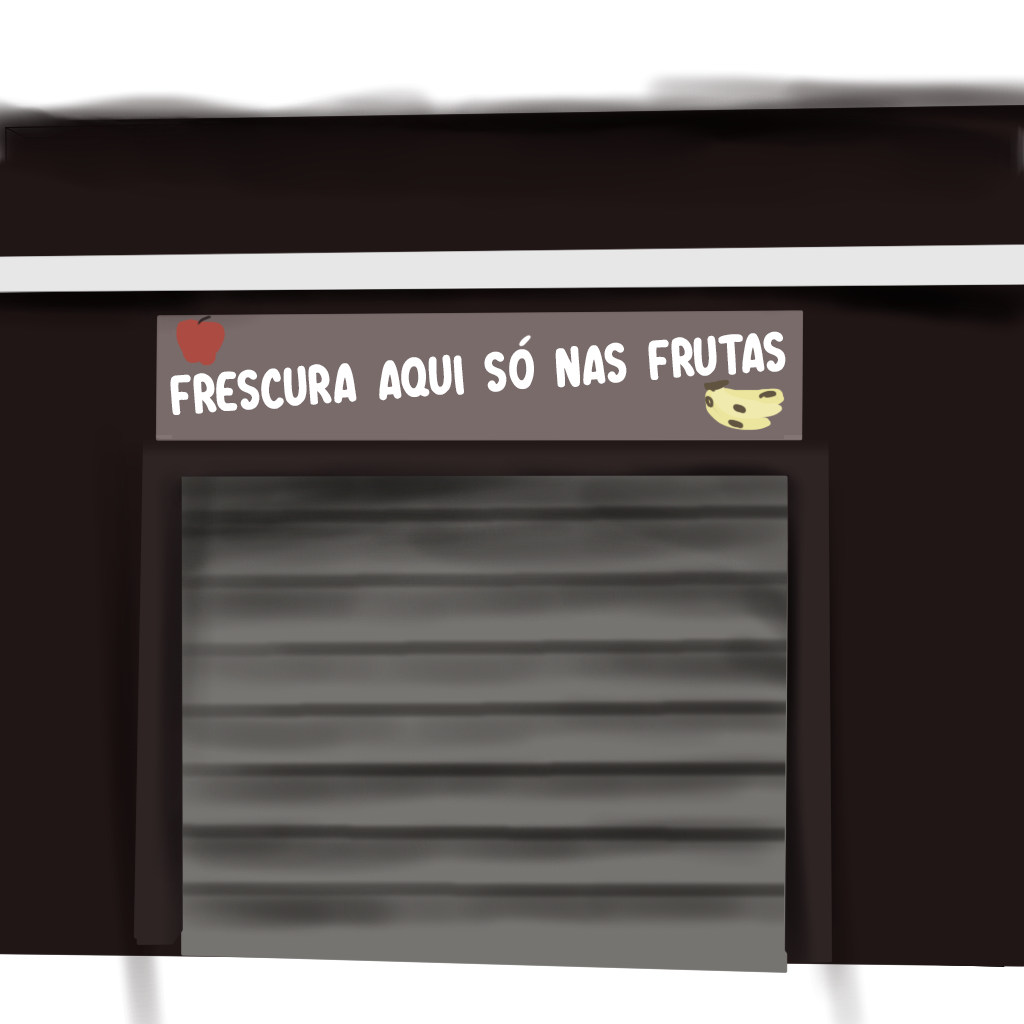
<style>
.page{position:relative;width:1024px;height:1024px;background:#211616}
.page>*{position:absolute;margin:0}
.t1{font:42.5px "Dreamwalks";color:#ffffff}
</style>
<div class="page">
<p class="t1" style="left:170px;top:331px;width:616px;height:84px;rotate:-4deg">fRESCURA AQUI SO NAS FRUTAS</p>
</div>
